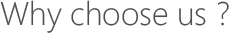
<style>
.page{position:relative;width:229px;height:33px;background:#ffffff}
.page>*{position:absolute;margin:0}
.t1{font:32.6px "SegoeWPN-Light";color:#4f4f4f}
</style>
<div class="page">
<p class="t1" style="left:0px;top:0px;width:229px;height:33px">Why choose us ?</p>
</div>
